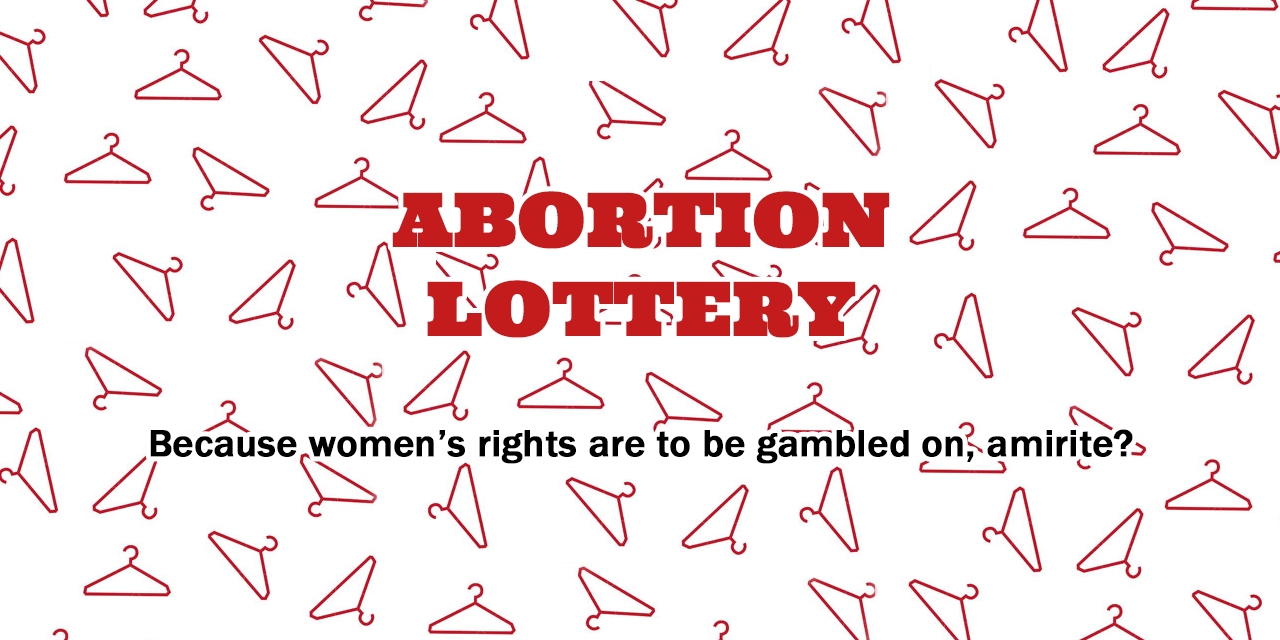
<style>
.page{position:relative;width:1280px;height:640px;background:#ffffff}
.page>*{position:absolute;margin:0}
.t1{font:74px "Ultra-Regular";color:#c41c1c;font-weight:bold}
.t2{font:39px "FranklinGothic-Medium";color:#000000;font-weight:bold}
</style>
<div class="page">
<p class="t1" style="left:392px;top:191px;width:498px;height:147px;text-align:center">ABORTION<br>LOTTERY</p>
<p class="t2" style="left:150px;top:429px;width:983px;height:35px">Because women’s rights are to be gambled on, amirite?</p>
</div>
